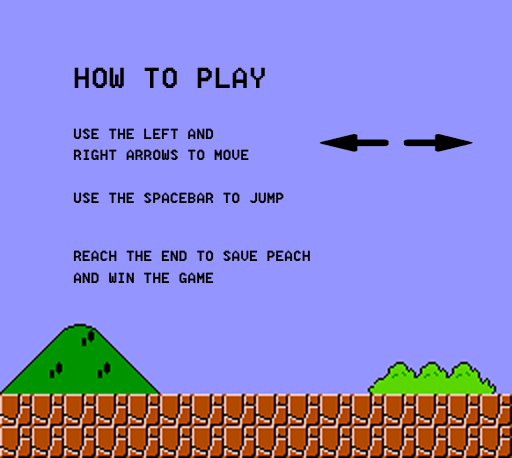
<style>
.page{position:relative;width:512px;height:458px;background:#9595ff}
.page>*{position:absolute;margin:0}
.t1{font:18px "8514oem";color:#000000;scale:1.04 1}
.t2{font:36px "8514oem";color:#000000;scale:1.04 1}
</style>
<div class="page">
<p class="t1" style="left:73px;top:67px;width:237px;height:216px"><span class="t2">HOW TO PLAY<br><br><br></span>USE THE LEFT AND<br>RIGHT ARROWS TO MOVE<br><br>USE THE SPACEBAR TO JUMP<br><br><br>REACH THE END TO SAVE PEACH<br>AND WIN THE GAME</p>
</div>
